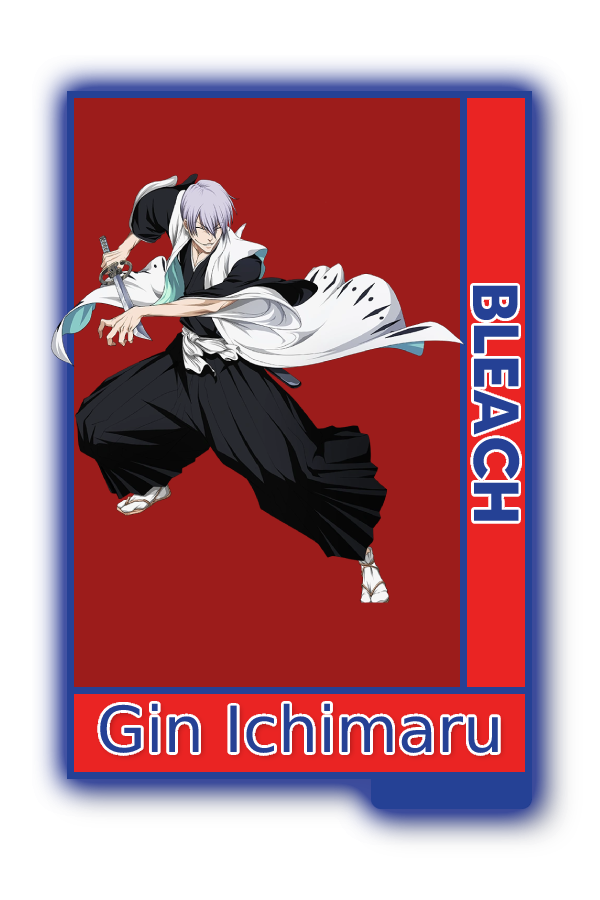
<style>
.page{position:relative;width:600px;height:900px;background:#9c1c1b}
.page>*{position:absolute;margin:0}
.t1{font:63.6px "MADETOMMY-Bold";color:#254195}
.t2{font:63.6px "CoolveticaRg-Regular";color:#254195}
</style>
<div class="page">
<p class="t1" style="left:473px;top:285px;width:47px;height:236px;rotate:90deg">BLEACH</p>
<p class="t2" style="left:100px;top:703px;width:398px;height:50px">Gin Ichimaru</p>
</div>
